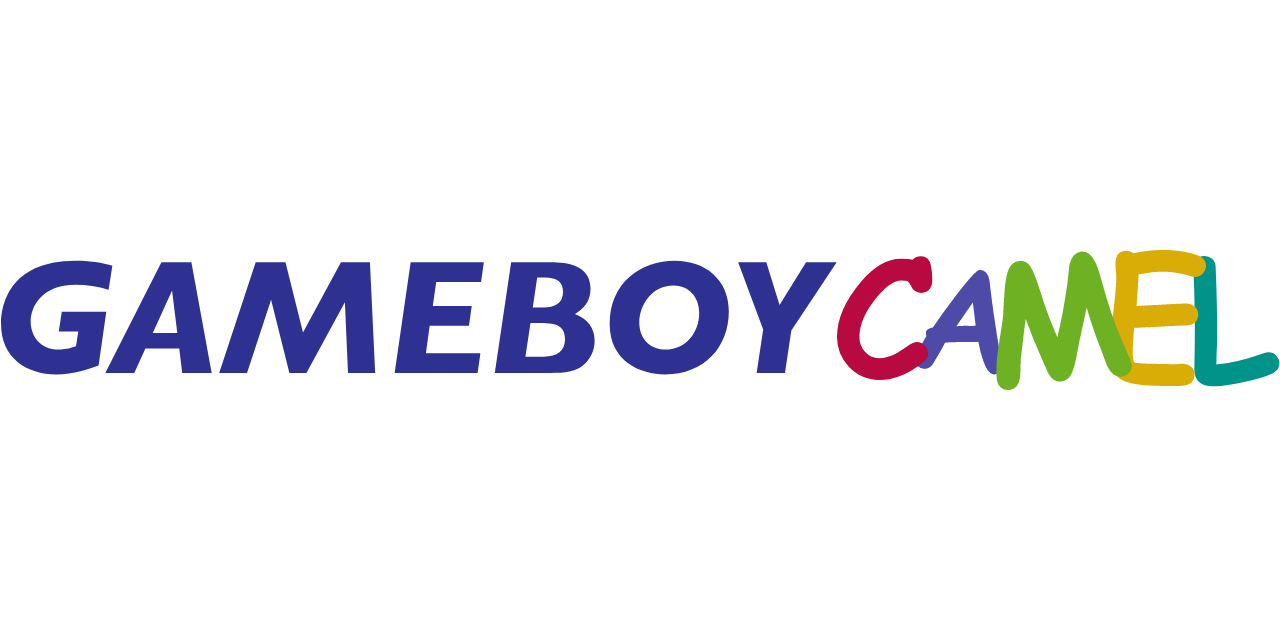
<style>
.page{position:relative;width:1280px;height:640px;background:#ffffff}
.page>*{position:absolute;margin:0}
.t1{font:163.7px "ComicSansMS-Bold";color:#b80940}
.t2{font:163.7px "ComicSansMS-Bold";color:#6eb123}
.t3{font:163.7px "ComicSansMS-Bold";color:#d9ad06}
.t4{font:163.7px "ComicSansMS-Bold";color:#009389}
.t5{font:163.7px "GillSans-HeavyItalic";color:#2e3192}
.t6{font:140.3px "ComicSansMS-Bold";color:#4e4aa8}
</style>
<div class="page">
<p class="t1" style="left:837px;top:256px;width:96px;height:124px">C</p>
<p class="t2" style="left:996px;top:251px;width:136px;height:139px;rotate:-7deg">M</p>
<p class="t3" style="left:1110px;top:250px;width:96px;height:136px;rotate:2deg">E</p>
<p class="t4" style="left:1193px;top:256px;width:87px;height:131px;rotate:-3deg">L</p>
<p class="t5" style="left:1px;top:260px;width:836px;height:115px">GAMEBOY</p>
<p class="t6" style="left:914px;top:269px;width:90px;height:106px;rotate:4deg">A</p>
</div>
